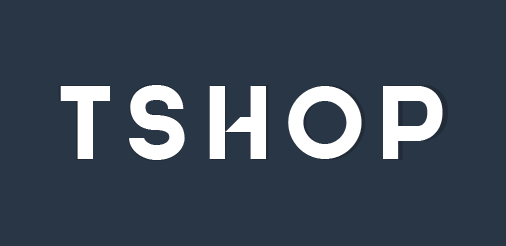
<style>
.page{position:relative;width:506px;height:246px;background:#293646}
.page>*{position:absolute;margin:0}
.t1{font:101.8px "Governor";letter-spacing:0.09em;color:#ffffff;text-transform:uppercase}
.t2{font:99.9px "Governor";letter-spacing:0.09em;color:#ffffff;text-transform:uppercase}
</style>
<div class="page">
<p class="t1" style="left:58px;top:84px;width:390px;height:77px">TSHOP</p>
<p class="t2" style="left:60px;top:85px;width:383px;height:75px">TSHOP</p>
</div>
